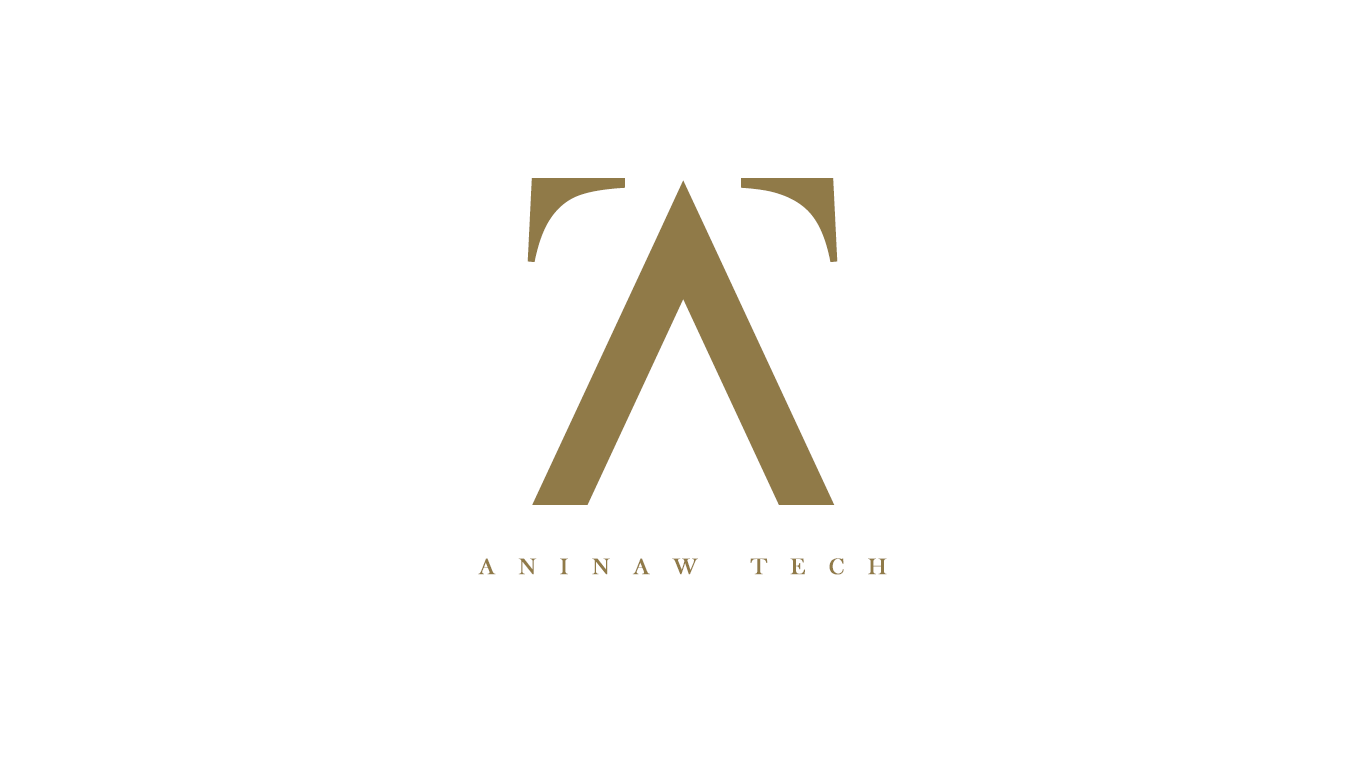
<style>
.page{position:relative;width:1366px;height:768px;background:#ffffff}
.page>*{position:absolute;margin:0}
.t1{font:453.3px "AgrozzaDemoRegular";letter-spacing:0.05em;color:#907a48;text-transform:uppercase}
.t2{font:23.1px "BaskOldFace";letter-spacing:1em;color:#907a48;text-transform:uppercase;font-weight:bold}
</style>
<div class="page">
<p class="t1" style="left:532px;top:180px;width:303px;height:325px">A</p>
<p class="t2" style="left:478px;top:558px;width:409px;height:17px">aninaw tech</p>
</div>
